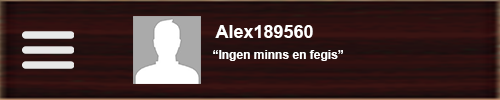
<style>
.page{position:relative;width:500px;height:100px}
.page>*{position:absolute;margin:0}
.t1{font:18px "Arial-BoldMT";color:#ffffff}
.t2{font:12px "Arial-BoldMT";color:#ffffff}
</style>
<div class="page">
<p class="t1" style="left:215px;top:25px;width:98px;height:13px">Alex189560</p>
<p class="t2" style="left:213px;top:50px;width:130px;height:11px">“Ingen minns en fegis”</p>
</div>
